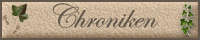
<style>
.page{position:relative;width:200px;height:40px}
.page>*{position:absolute;margin:0}
.t1{font:34px "EdwardianScriptITC";color:#62574b}
</style>
<div class="page">
<p class="t1" style="left:52px;top:3px;width:107px;height:25px">Chroniken</p>
</div>
